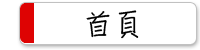
<style>
.page{position:relative;width:200px;height:50px;background:#ffffff}
.page>*{position:absolute;margin:0}
.t1{font:30px "DFChu-W4-WIN-BF";color:#000000}
</style>
<div class="page">
<p class="t1" style="left:86px;top:10px;width:53px;height:29px">首頁</p>
</div>
